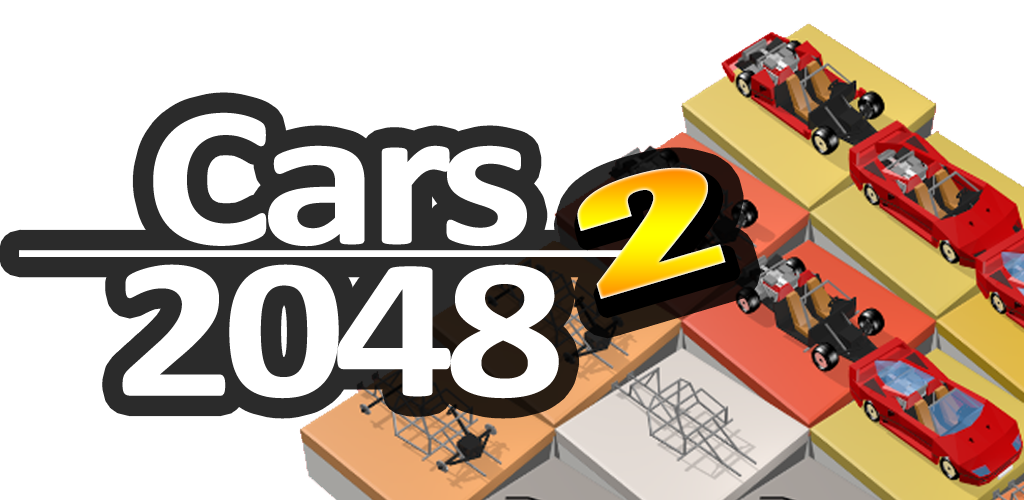
<style>
.page{position:relative;width:1024px;height:500px;background:#ffffff}
.page>*{position:absolute;margin:0}
.t1{font:203.7px/152px "Calibri-Bold";letter-spacing:-0.05em;color:#ffffff;scale:1.19 1}
.t2{font:135.7px "Impact";letter-spacing:-0.05em;scale:2.2 1}
</style>
<div class="page">
<p class="t1" style="left:122px;top:112px;width:437px;height:287px;text-align:center">Cars<br>2048</p>
<p class="t2" style="left:577px;top:167px;width:149px;height:132px;rotate:-17deg">2</p>
</div>
